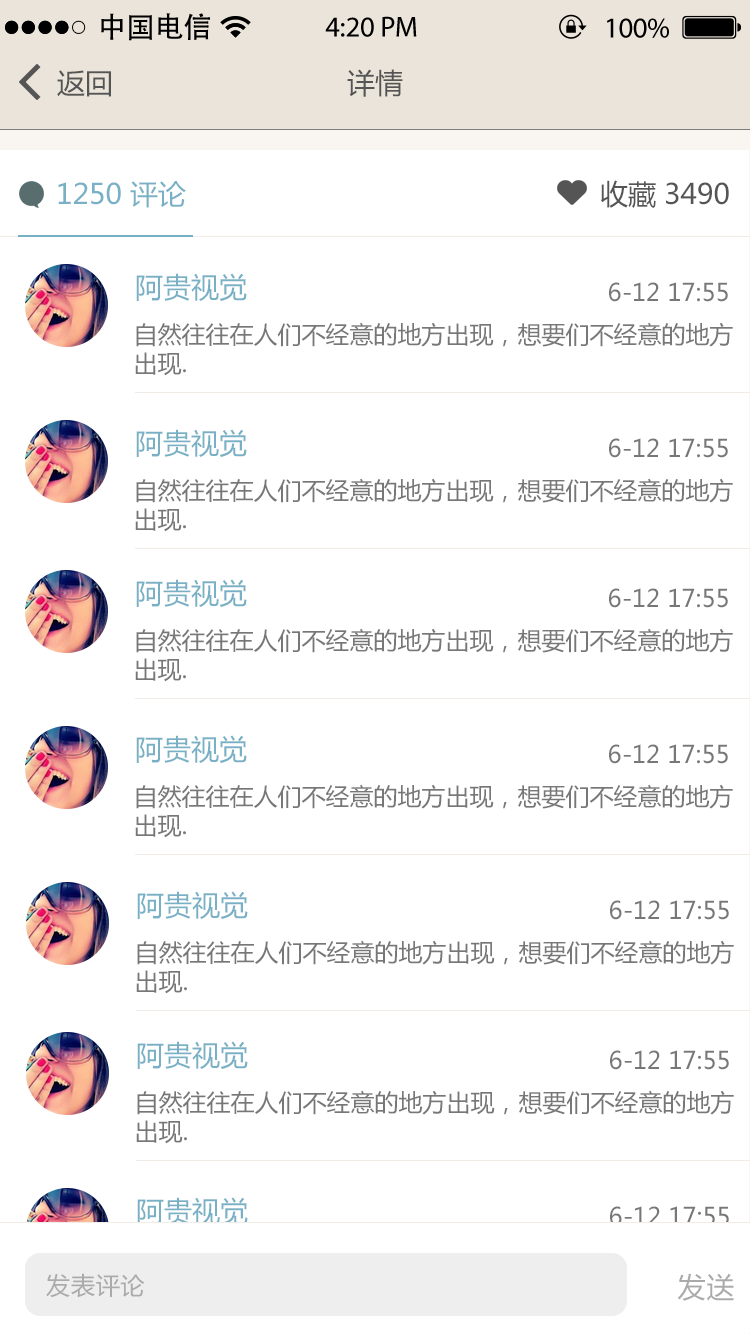
<style>
.page{position:relative;width:750px;height:1334px;background:#ffffff}
.page>*{position:absolute;margin:0}
.t1{font:28.8px "AdobeHeitiStd-Regular";color:#000000}
.t2{font:28.8px "MyriadPro-Regular";color:#000000}
.t3{font:28px "MicrosoftYaHei";color:#555555}
.t4{font:28px "MicrosoftYaHei";color:#78b0c5}
.t5{font:24px "MicrosoftYaHei";color:#777777}
.t6{font:24px "MicrosoftYaHei";letter-spacing:0.036em;color:#aaaaaa}
.t7{font:28px "MicrosoftYaHei";letter-spacing:0.036em;color:#aaaaaa}
</style>
<div class="page">
<p class="t1" style="left:101px;top:13px;width:109px;height:28px">中国电信</p>
<p class="t2" style="left:325px;top:16px;width:92px;height:21px">4:20 PM</p>
<p class="t2" style="left:607px;top:18px;width:62px;height:20px">100%</p>
<p class="t3" style="left:57px;top:70px;width:54px;height:27px">返回</p>
<p class="t3" style="left:347px;top:69px;width:56px;height:28px">详情</p>
<p class="t4" style="left:58px;top:181px;width:128px;height:27px">1250 评论</p>
<p class="t3" style="left:601px;top:180px;width:128px;height:28px"><span class="t4">                                                                     </span> 收藏 3490</p>
<p class="t4" style="left:136px;top:273px;width:111px;height:28px">阿贵视觉</p>
<p class="t5" style="left:609px;top:282px;width:119px;height:20px">6-12 17:55</p>
<p class="t5" style="left:135px;top:322px;width:598px;height:54px">自然往往在人们不经意的地方出现，想要们不经意的地方<br>出现.</p>
<p class="t4" style="left:136px;top:429px;width:111px;height:28px">阿贵视觉</p>
<p class="t5" style="left:609px;top:438px;width:119px;height:20px">6-12 17:55</p>
<p class="t5" style="left:135px;top:478px;width:598px;height:54px">自然往往在人们不经意的地方出现，想要们不经意的地方<br>出现.</p>
<p class="t4" style="left:136px;top:579px;width:111px;height:28px">阿贵视觉</p>
<p class="t5" style="left:609px;top:588px;width:119px;height:20px">6-12 17:55</p>
<p class="t5" style="left:135px;top:628px;width:598px;height:54px">自然往往在人们不经意的地方出现，想要们不经意的地方<br>出现.</p>
<p class="t4" style="left:136px;top:735px;width:111px;height:28px">阿贵视觉</p>
<p class="t5" style="left:609px;top:744px;width:119px;height:20px">6-12 17:55</p>
<p class="t5" style="left:135px;top:784px;width:598px;height:54px">自然往往在人们不经意的地方出现，想要们不经意的地方<br>出现.</p>
<p class="t4" style="left:137px;top:891px;width:111px;height:28px">阿贵视觉</p>
<p class="t5" style="left:610px;top:900px;width:119px;height:20px">6-12 17:55</p>
<p class="t5" style="left:136px;top:940px;width:598px;height:54px">自然往往在人们不经意的地方出现，想要们不经意的地方<br>出现.</p>
<p class="t4" style="left:137px;top:1041px;width:111px;height:28px">阿贵视觉</p>
<p class="t5" style="left:610px;top:1050px;width:119px;height:20px">6-12 17:55</p>
<p class="t5" style="left:136px;top:1090px;width:598px;height:54px">自然往往在人们不经意的地方出现，想要们不经意的地方<br>出现.</p>
<p class="t4" style="left:137px;top:1197px;width:111px;height:28px">阿贵视觉</p>
<p class="t5" style="left:610px;top:1206px;width:119px;height:20px">6-12 17:55</p>
<p class="t6" style="left:46px;top:1273px;width:99px;height:25px">发表评论</p>
<p class="t7" style="left:677px;top:1273px;width:57px;height:28px">发送</p>
</div>
